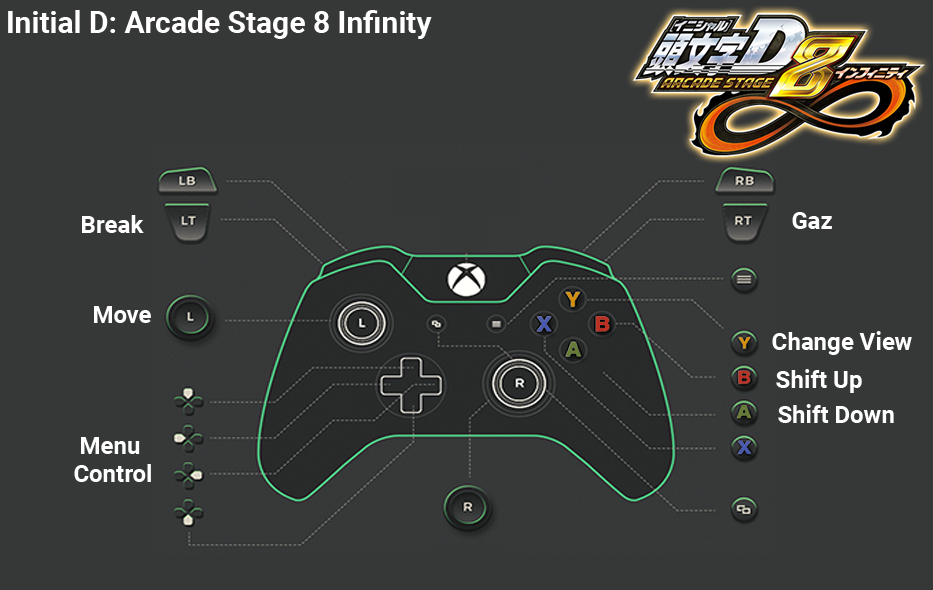
<style>
.page{position:relative;width:933px;height:590px;background:#363838}
.page>*{position:absolute;margin:0}
.t1{font:30px "Roboto-Bold";color:#ffffff}
.t2{font:24px "Roboto-Bold";color:#ffffff}
.t3{font:24px/28px "Roboto-Bold";color:#ffffff}
</style>
<div class="page">
<p class="t1" style="left:8px;top:10px;width:424px;height:29px">Initial D: Arcade Stage 8 Infinity</p>
<p class="t2" style="left:82px;top:215px;width:62px;height:18px">Break</p>
<p class="t2" style="left:792px;top:212px;width:40px;height:17px">Gaz</p>
<p class="t2" style="left:94px;top:306px;width:57px;height:17px">Move</p>
<p class="t2" style="left:772px;top:331px;width:140px;height:24px">Change View</p>
<p class="t2" style="left:776px;top:369px;width:86px;height:24px">Shift Up</p>
<p class="t2" style="left:778px;top:404px;width:116px;height:19px">Shift Down</p>
<p class="t3" style="left:74px;top:437px;width:77px;height:45px;text-align:center">Menu <br>Control</p>
</div>
